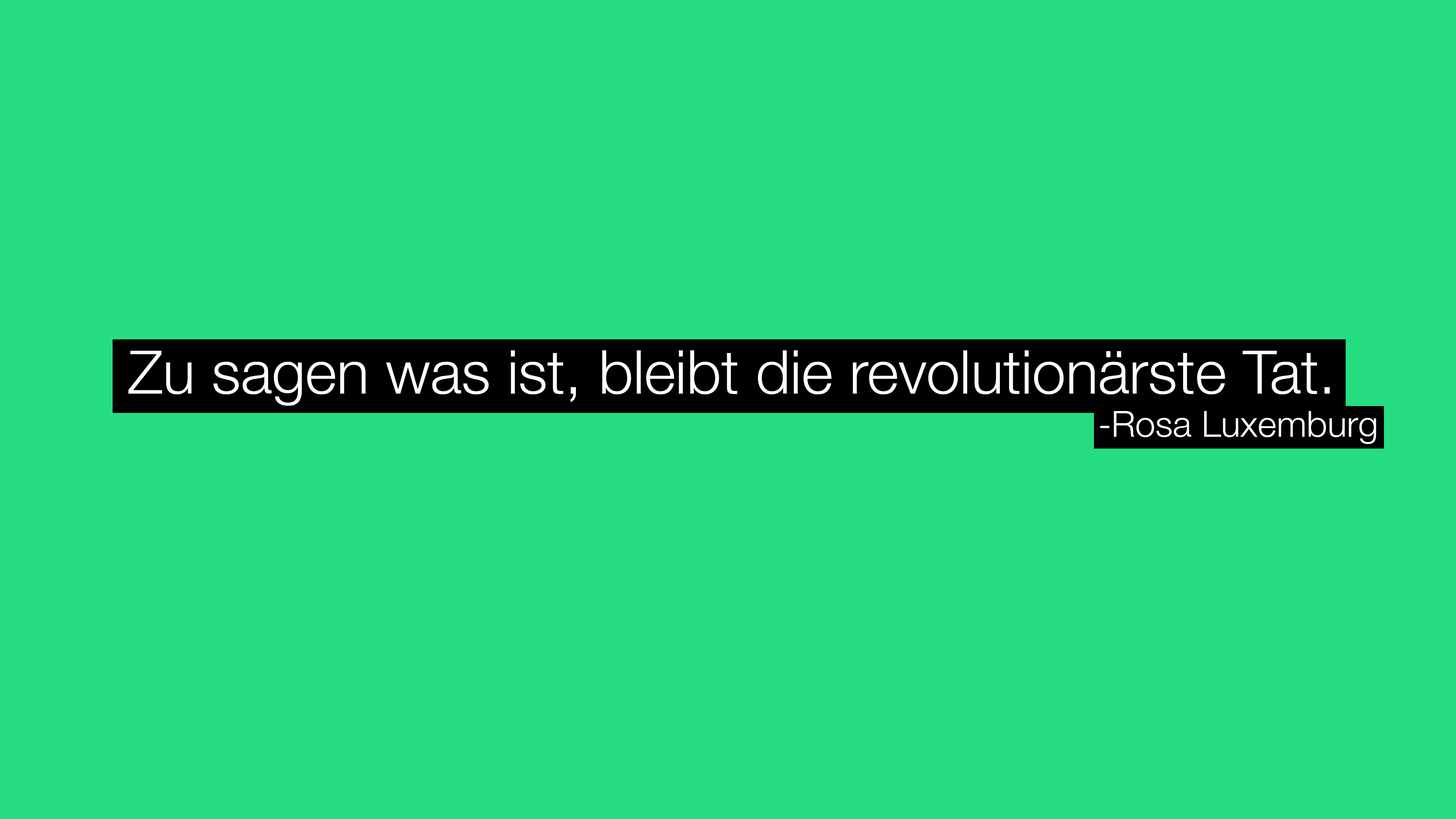
<style>
.page{position:relative;width:1456px;height:819px;background:#26de81}
.page>*{position:absolute;margin:0}
.t1{font:60.2px "HelveticaNeue-Light";color:#ffffff}
.t2{font:36.1px "HelveticaNeue-Light";color:#ffffff}
</style>
<div class="page">
<p class="t1" style="left:128px;top:350px;width:1202px;height:56px">Zu sagen was ist, bleibt die revolutionärste Tat.</p>
<p class="t2" style="left:1100px;top:411px;width:276px;height:33px">-Rosa Luxemburg</p>
</div>
